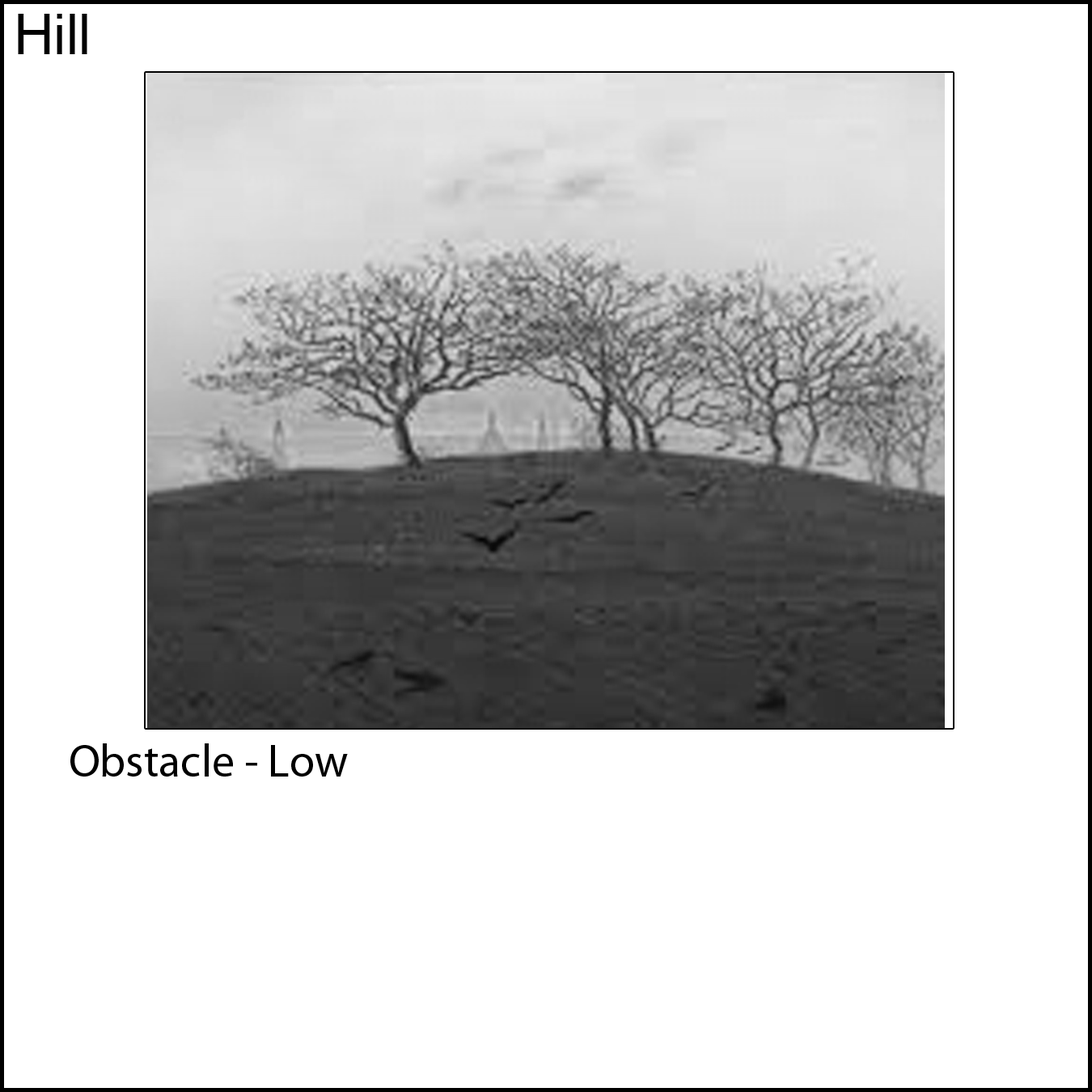
<style>
.page{position:relative;width:1092px;height:1092px;background:#ffffff}
.page>*{position:absolute;margin:0}
.t1{font:55.6px "ArialMT";color:#000000}
.t2{font:45.5px "MyriadPro-Regular";color:#000000}
</style>
<div class="page">
<p class="t1" style="left:18px;top:14px;width:69px;height:40px">Hill</p>
<p class="t2" style="left:70px;top:743px;width:278px;height:34px">Obstacle - Low</p>
</div>
